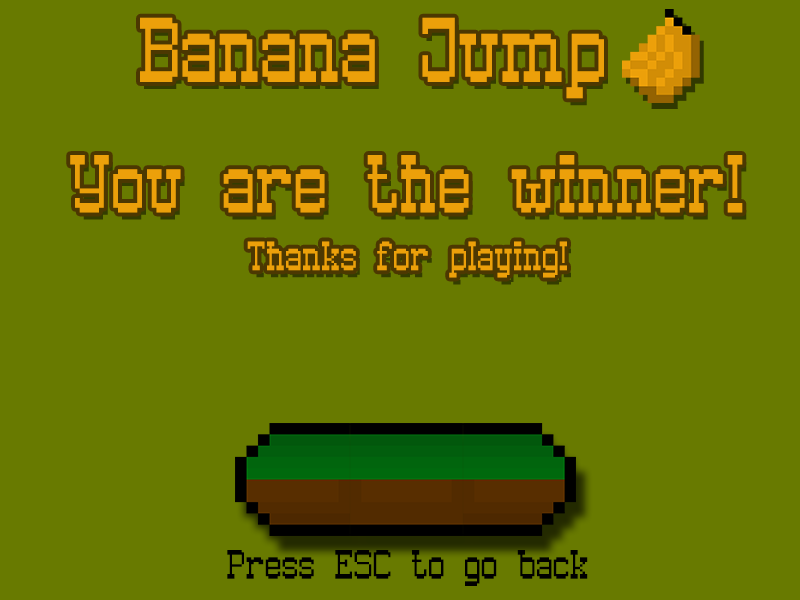
<style>
.page{position:relative;width:800px;height:600px;background:#687a00}
.page>*{position:absolute;margin:0}
.t1{font:106.7px "Old_Pixel-7";color:#eca00a}
.t2{font:96px "Old_Pixel-7";color:#eca00a}
.t3{font:48px "Old_Pixel-7";color:#eca00a}
.t4{font:48px "Old_Pixel-7";color:#000000}
</style>
<div class="page">
<p class="t1" style="left:140px;top:17px;width:464px;height:82px">Banana Jump</p>
<p class="t2" style="left:70px;top:155px;width:673px;height:123px;text-align:center">You are the winner!<br><span class="t3">Thanks for playing!</span></p>
<p class="t4" style="left:227px;top:550px;width:361px;height:36px">Press ESC to go back</p>
</div>
